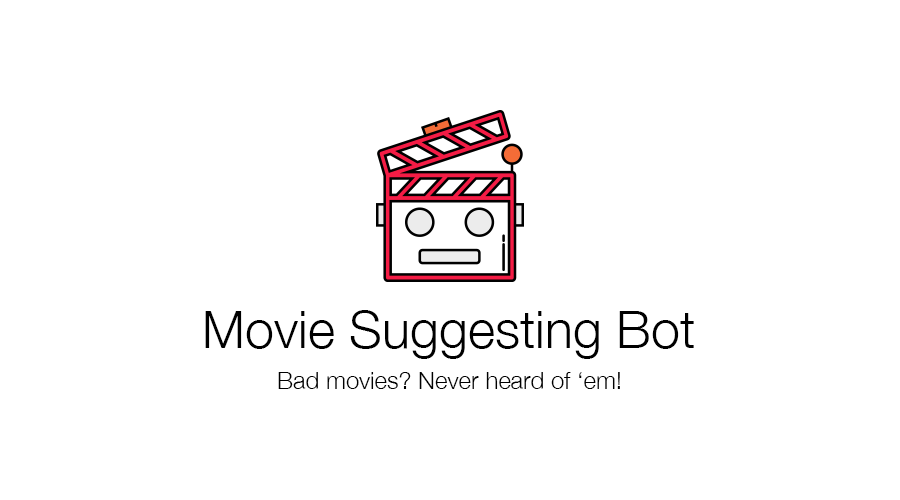
<style>
.page{position:relative;width:900px;height:500px;background:#ffffff}
.page>*{position:absolute;margin:0}
.t1{font:52px "HelveticaNeue-Light";color:#000000}
.t2{font:24px "HelveticaNeue-Light";color:#000000}
</style>
<div class="page">
<p class="t1" style="left:205px;top:310px;width:489px;height:49px">Movie Suggesting Bot</p>
<p class="t2" style="left:278px;top:372px;width:342px;height:17px">Bad movies? Never heard of ‘em!</p>
</div>
